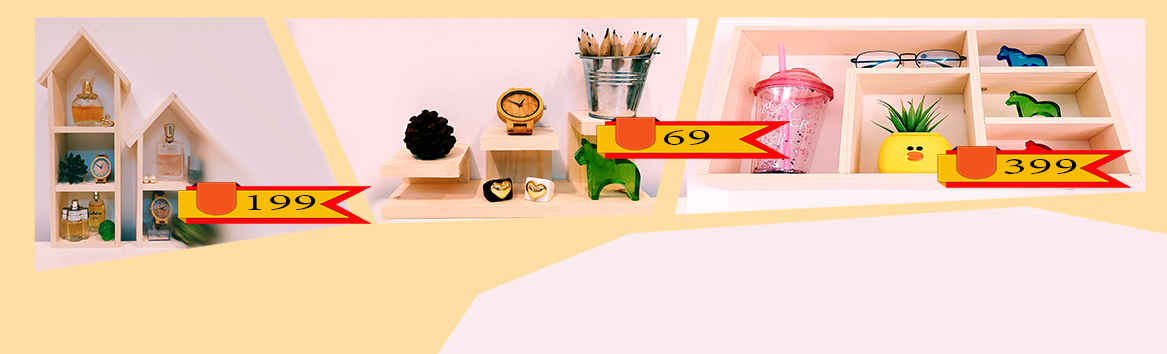
<style>
.page{position:relative;width:1167px;height:354px;background:#ffdea4}
.page>*{position:absolute;margin:0}
.t1{font:36px "AdobeThai-Regular";color:#000000;scale:1.82 1}
</style>
<div class="page">
<p class="t1" style="left:664px;top:130px;width:46px;height:15px">69</p>
<p class="t1" style="left:1004px;top:159px;width:73px;height:15px">399</p>
<p class="t1" style="left:248px;top:195px;width:68px;height:15px">199</p>
</div>
